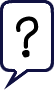
<style>
.page{position:relative;width:54px;height:90px;background:#ffffff}
.page>*{position:absolute;margin:0}
.t1{font:52.9px "OMGWriteLikeWilliam";color:#000000;font-weight:bold}
</style>
<div class="page">
<p class="t1" style="left:16px;top:16px;width:23px;height:42px">?</p>
</div>
